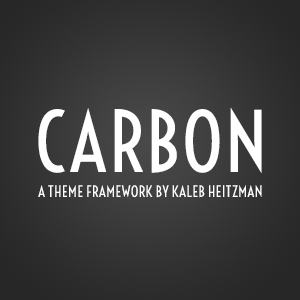
<style>
.page{position:relative;width:300px;height:300px}
.page>*{position:absolute;margin:0}
.t1{font:80px "Voltaire";letter-spacing:0.01em;color:#ffffff}
.t2{font:15px "Voltaire";letter-spacing:0.004em;color:#ffffff}
</style>
<div class="page">
<p class="t1" style="left:38px;top:107px;width:224px;height:66px">CARBON</p>
<p class="t2" style="left:38px;top:185px;width:224px;height:13px">A THEME FRAMEWORK BY KALEB HEITZMAN</p>
</div>
